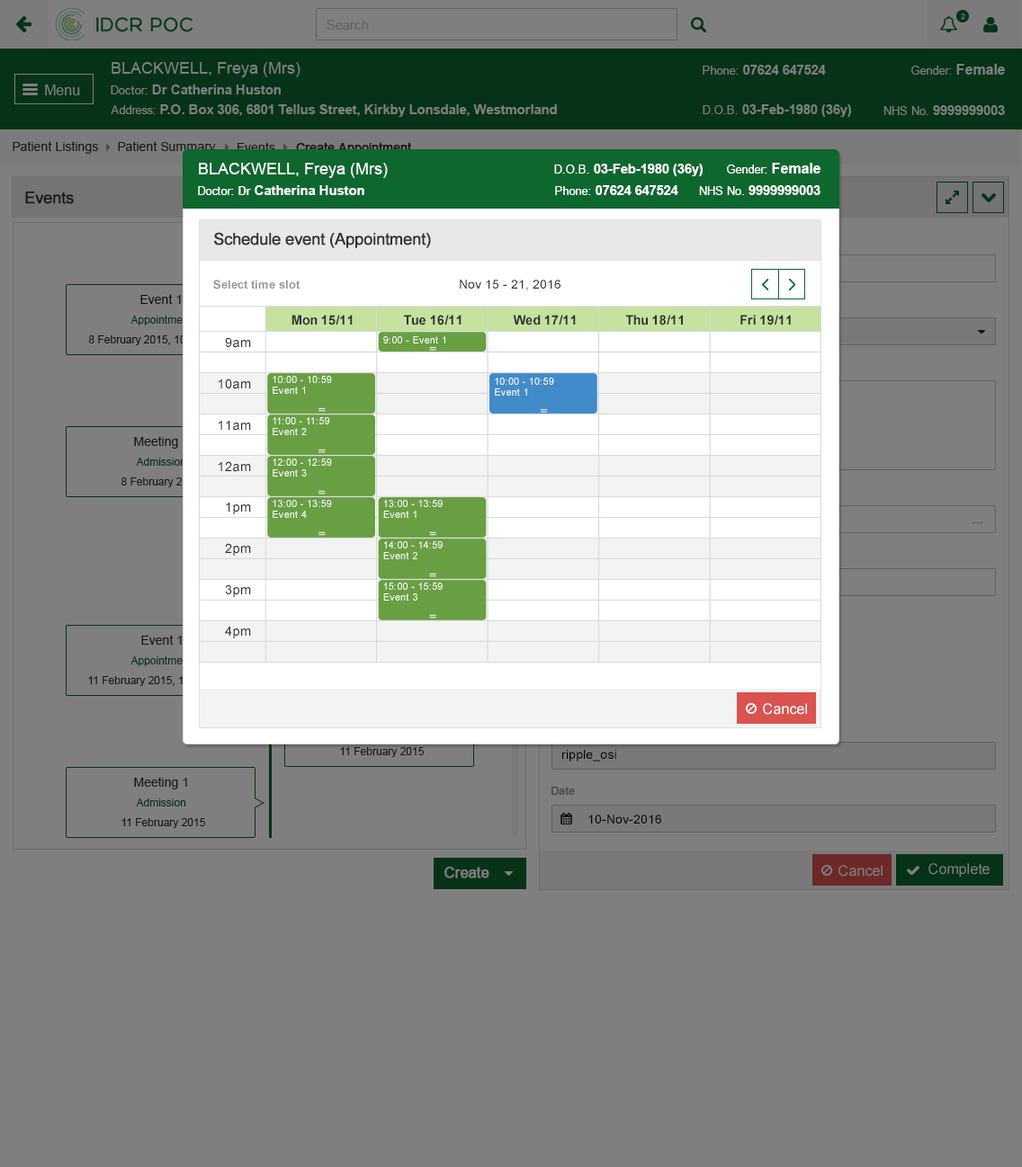
<style>
.page{position:relative;width:1022px;height:1167px;background:#7f7f7f}
.page>*{position:absolute;margin:0}
.t1{font:12.6px "ArialMT";color:#181818}
.t2{font:12.6px "ArialMT"}
.t3{font:12.6px "ArialMT";font-weight:bold}
.t4{font:16.2px "ArialMT";color:#fffefe}
.t5{font:13.5px "Arial-BoldMT";color:#ffffff}
.t6{font:11.7px "ArialMT";color:#ffffff}
.t7{font:14.4px "Arial-BoldMT";color:#ffffff}
.t8{font:11.7px "Arial-BoldMT";color:#ffffff}
.t9{font:16.2px "ArialMT";color:#303030;font-weight:bold}
.t10{font:11.7px "Arial-BoldMT";color:#959595}
.t11{font:12.6px "ArialMT";color:#303030}
.t12{font:12.6px "ArialMT";color:#242424}
.t13{font:10.8px "ArialMT";color:#063317}
.t14{font:13.1px "Arial-BoldMT";color:#303030}
.t15{font:13.1px "ArialMT";color:#303030}
.t16{font:9.8px "ArialMT";color:#fefefe}
.t17{font:9.8px/10.9px "ArialMT";color:#fefefe}
.t18{font:10.8px "ArialMT";color:#303030}
.t19{font:12.6px "ArialMT";color:#000000}
.t20{font:11.7px "Arial-BoldMT";color:#4a4a4a}
.t21{font:14.4px "ArialMT";color:#7f7f7f;font-weight:bold}
</style>
<div class="page">
<p class="t1" style="left:13px;top:141px;width:86px;height:13px">Patient Listings</p>
<p class="t1" style="left:118px;top:141px;width:98px;height:13px">Patient Summary</p>
<p class="t2" style="left:237px;top:142px;width:38px;height:10px">Events</p>
<p class="t3" style="left:296px;top:142px;width:116px;height:14px">Create Appointment</p>
<p class="t4" style="left:199px;top:163px;width:189px;height:15px">BLACKWELL, Freya (Mrs)</p>
<p class="t5" style="left:554px;top:164px;width:148px;height:12px"><span class="t6">D.O.B. </span>03-Feb-1980 (36y)</p>
<p class="t6" style="left:727px;top:163px;width:93px;height:11px">Gender: <span class="t7">Female</span></p>
<p class="t5" style="left:198px;top:185px;width:166px;height:10px"><span class="t6">Doctor: </span><span class="t8">Dr </span>Catherina Huston</p>
<p class="t5" style="left:555px;top:185px;width:123px;height:10px"><span class="t6">Phone: </span>07624 647524</p>
<p class="t5" style="left:699px;top:185px;width:121px;height:10px"><span class="t6">NHS No. </span>9999999003</p>
<p class="t9" style="left:25px;top:192px;width:49px;height:12px">Events</p>
<p class="t9" style="left:214px;top:232px;width:217px;height:16px">Schedule event (Appointment)</p>
<p class="t10" style="left:213px;top:280px;width:87px;height:10px">Select time slot</p>
<p class="t11" style="left:460px;top:280px;width:100px;height:10px">Nov 15 - 21, 2016</p>
<p class="t12" style="left:140px;top:294px;width:41px;height:10px">Event 1</p>
<p class="t13" style="left:130px;top:316px;width:62px;height:10px">Appointment</p>
<p class="t14" style="left:291px;top:315px;width:62px;height:11px">Mon 15/11</p>
<p class="t14" style="left:404px;top:315px;width:57px;height:11px">Tue 16/11</p>
<p class="t14" style="left:513px;top:315px;width:63px;height:11px">Wed 17/11</p>
<p class="t14" style="left:625px;top:315px;width:58px;height:11px">Thu 18/11</p>
<p class="t14" style="left:740px;top:315px;width:50px;height:11px">Fri 19/11</p>
<p class="t15" style="left:225px;top:337px;width:26px;height:11px">9am</p>
<p class="t16" style="left:383px;top:336px;width:62px;height:8px">9:00 - Event 1</p>
<p class="t17" style="left:272px;top:376px;width:60px;height:18px">10:00 - 10:59 <br>Event 1</p>
<p class="t17" style="left:495px;top:378px;width:59px;height:18px">10:00 - 10:59 <br>Event 1</p>
<p class="t15" style="left:219px;top:379px;width:32px;height:10px">10am</p>
<p class="t15" style="left:219px;top:420px;width:32px;height:11px">11am</p>
<p class="t17" style="left:272px;top:417px;width:57px;height:18px">11:00 - 11:59 <br>Event 2</p>
<p class="t11" style="left:134px;top:436px;width:53px;height:13px">Meeting 1</p>
<p class="t13" style="left:136px;top:458px;width:50px;height:8px">Admission</p>
<p class="t15" style="left:219px;top:461px;width:32px;height:11px">12am</p>
<p class="t17" style="left:272px;top:459px;width:60px;height:18px">12:00 - 12:59 <br>Event 3</p>
<p class="t18" style="left:121px;top:478px;width:80px;height:9px">8 February 2015</p>
<p class="t15" style="left:226px;top:502px;width:25px;height:12px">1pm</p>
<p class="t17" style="left:272px;top:500px;width:60px;height:18px">13:00 - 13:59 <br>Event 4</p>
<p class="t17" style="left:383px;top:500px;width:59px;height:18px">13:00 - 13:59 <br>Event 1</p>
<p class="t2" style="left:973px;top:522px;width:9px;height:1px">...</p>
<p class="t15" style="left:225px;top:543px;width:26px;height:13px">2pm</p>
<p class="t17" style="left:383px;top:541px;width:59px;height:18px">14:00 - 14:59 <br>Event 2</p>
<p class="t15" style="left:225px;top:585px;width:26px;height:12px">3pm</p>
<p class="t17" style="left:383px;top:583px;width:59px;height:18px">15:00 - 15:59 <br>Event 3</p>
<p class="t15" style="left:225px;top:626px;width:26px;height:12px">4pm</p>
<p class="t11" style="left:141px;top:635px;width:41px;height:10px">Event 1</p>
<p class="t13" style="left:130px;top:656px;width:62px;height:10px">Appointment</p>
<p class="t18" style="left:340px;top:747px;width:84px;height:10px">11 February 2015</p>
<p class="t19" style="left:562px;top:750px;width:54px;height:12px">ripple_osi</p>
<p class="t11" style="left:134px;top:777px;width:53px;height:13px">Meeting 1</p>
<p class="t20" style="left:551px;top:786px;width:24px;height:9px">Date</p>
<p class="t13" style="left:136px;top:799px;width:50px;height:8px">Admission</p>
<p class="t18" style="left:121px;top:818px;width:84px;height:10px">11 February 2015</p>
<p class="t19" style="left:588px;top:815px;width:73px;height:9px">10-Nov-2016</p>
<p class="t21" style="left:444px;top:867px;width:45px;height:12px">Create</p>
</div>
